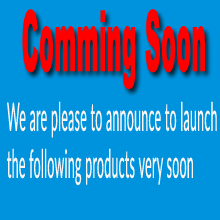
<style>
.page{position:relative;width:220px;height:220px;background:#0093dd}
.page>*{position:absolute;margin:0}
.t1{font:84.8px "Arial-Black";letter-spacing:0.025em;color:#ff0000;scale:0.26 1}
.t2{font:39.2px "Lato-Regular";letter-spacing:0.025em;color:#f8f5f2;scale:0.31 1}
</style>
<div class="page">
<p class="t1" style="left:22px;top:9px;width:183px;height:80px">Comming Soon</p>
<p class="t2" style="left:7px;top:101px;width:210px;height:85px">We are please to announce to launch <br>the following products very soon</p>
</div>
